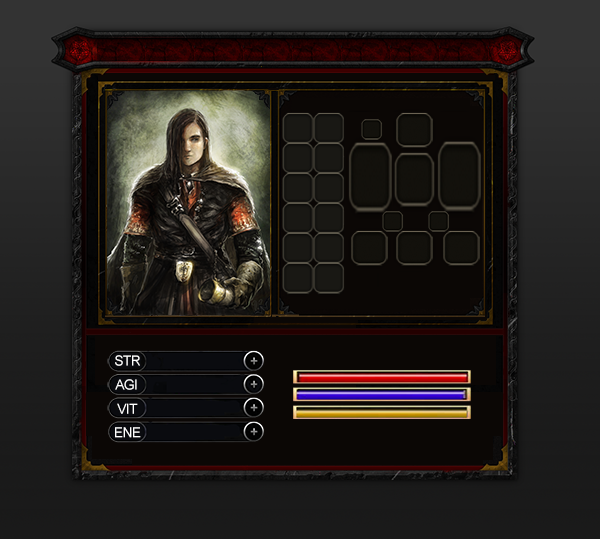
<style>
.page{position:relative;width:600px;height:539px}
.page>*{position:absolute;margin:0}
.t1{font:14px "ArialMT";letter-spacing:-0.05em;color:#ffffff;text-transform:uppercase}
</style>
<div class="page">
<p class="t1" style="left:115px;top:355px;width:25px;height:11px">str</p>
<p class="t1" style="left:115px;top:379px;width:22px;height:11px">agi</p>
<p class="t1" style="left:117px;top:403px;width:21px;height:11px">vit</p>
<p class="t1" style="left:115px;top:427px;width:26px;height:11px">ene</p>
</div>
